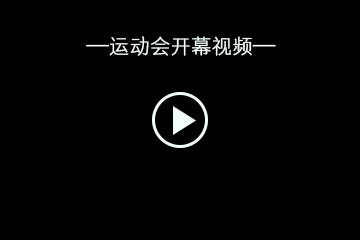
<style>
.page{position:relative;width:360px;height:240px;background:#000000}
.page>*{position:absolute;margin:0}
.t1{font:20px "HYTieXianHei-CEJ";color:#f5fff9;font-weight:bold}
.t2{font:22px "HYTieXianHei-CEJ";color:#f5fff9;font-weight:bold}
</style>
<div class="page">
<p class="t1" style="left:86px;top:36px;width:190px;height:20px"><span class="t2">—</span>运动会开幕视频<span class="t2">—</span></p>
</div>
